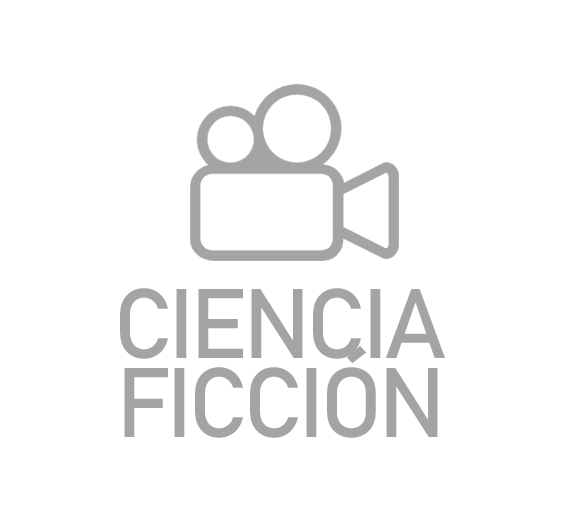
<style>
.page{position:relative;width:569px;height:514px;background:#ffffff}
.page>*{position:absolute;margin:0}
.t1{font:97.2px "Bahnschrift";letter-spacing:-0.05em;color:#a4a4a4}
</style>
<div class="page">
<p class="t1" style="left:120px;top:288px;width:325px;height:71px">CIENCIA</p>
<p class="t1" style="left:124px;top:346px;width:314px;height:92px">FICCIÓN</p>
</div>
